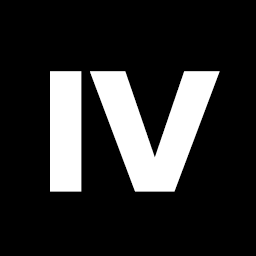
<style>
.page{position:relative;width:256px;height:256px;background:#000000}
.page>*{position:absolute;margin:0}
.t1{font:180px "ProximaNova-Extrabld";color:#ffffff}
</style>
<div class="page">
<p class="t1" style="left:50px;top:71px;width:170px;height:121px">IV</p>
</div>
